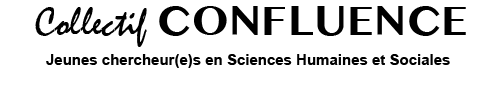
<style>
.page{position:relative;width:500px;height:93px;background:#ffffff}
.page>*{position:absolute;margin:0}
.t1{font:41.5px "MyanmarMN-Bold";color:#000000}
.t2{font:41.5px "Mistral";color:#000000}
.t3{font:15.1px "Arial-BoldMT";color:#000000}
</style>
<div class="page">
<p class="t1" style="left:35px;top:6px;width:431px;height:41px"><span class="t2">Collectif </span>CONFLUENCE</p>
<p class="t3" style="left:46px;top:54px;width:404px;height:14px">Jeunes chercheur(e)s en Sciences Humaines et Sociales</p>
</div>
